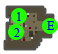
<style>
.page{position:relative;width:58px;height:54px;background:#ffffff}
.page>*{position:absolute;margin:0}
.t1{font:20px "TimesNewRomanPSMT";color:#0101dd}
</style>
<div class="page">
<p class="t1" style="left:17px;top:12px;width:4px;height:9px">1</p>
<p class="t1" style="left:14px;top:28px;width:6px;height:9px">2</p>
<p class="t1" style="left:47px;top:21px;width:8px;height:9px">E</p>
</div>
